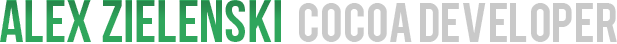
<style>
.page{position:relative;width:617px;height:44px;background:#ffffff}
.page>*{position:absolute;margin:0}
.t1{font:60px "BebasNeue";color:#2fa65c}
.t2{font:44px "Bebas";color:#b2b2b2}
</style>
<div class="page">
<p class="t1" style="left:0px;top:0px;width:281px;height:42px">ALEX ZIELENSKI</p>
<p class="t2" style="left:299px;top:3px;width:318px;height:39px;opacity:0.7">COCOA DEVELOPER</p>
</div>
